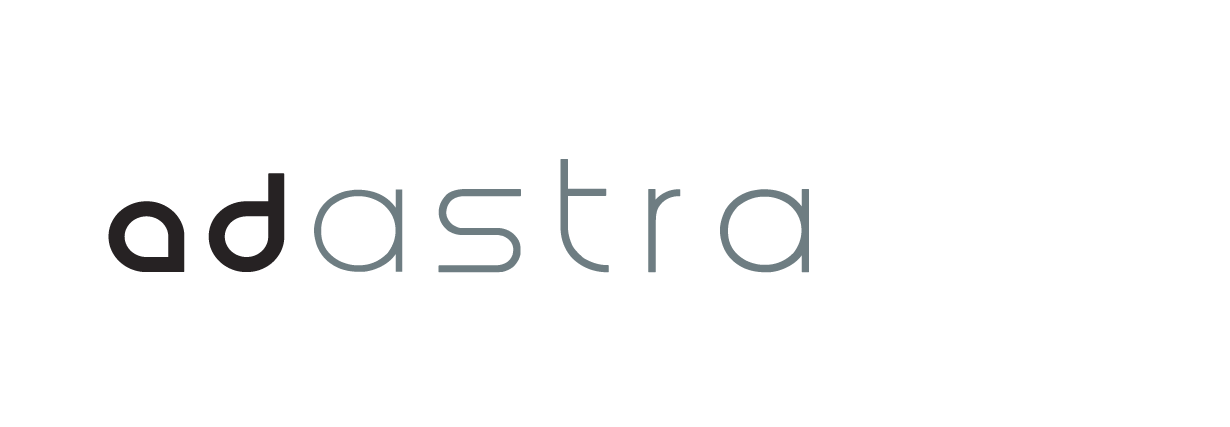
<style>
.page{position:relative;width:1230px;height:427px;background:#ffffff}
.page>*{position:absolute;margin:0}
.t1{font:133.4px "Steiner";letter-spacing:0.2em;color:#6e7d82;font-weight:bold;scale:1.07 1}
.t2{font:155.2px "REZ";letter-spacing:0.1em;color:#262223;font-weight:bold;scale:1.07 1}
.t3{font:133.4px "Steiner";letter-spacing:0.2em;color:#6e7d82;scale:1.07 1}
</style>
<div class="page">
<p class="t1" style="left:108px;top:159px;width:701px;height:114px"><span class="t2">ad</span><span class="t3">a</span>stra</p>
</div>
